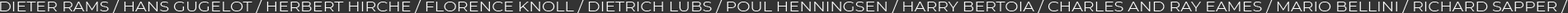
<style>
.page{position:relative;width:1568px;height:13px}
.page>*{position:absolute;margin:0}
.t1{font:13.2px "Montserrat-Light";color:#fefefe;scale:1.2 1}
</style>
<div class="page">
<p class="t1" style="left:0px;top:0px;width:1568px;height:13px">DIETER RAMS / HANS GUGELOT / HERBERT HIRCHE / FLORENCE KNOLL / DIETRICH LUBS / POUL HENNINGSEN / HARRY BERTOIA / CHARLES AND RAY EAMES / MARIO BELLINI / RICHARD SAPPER /</p>
</div>
